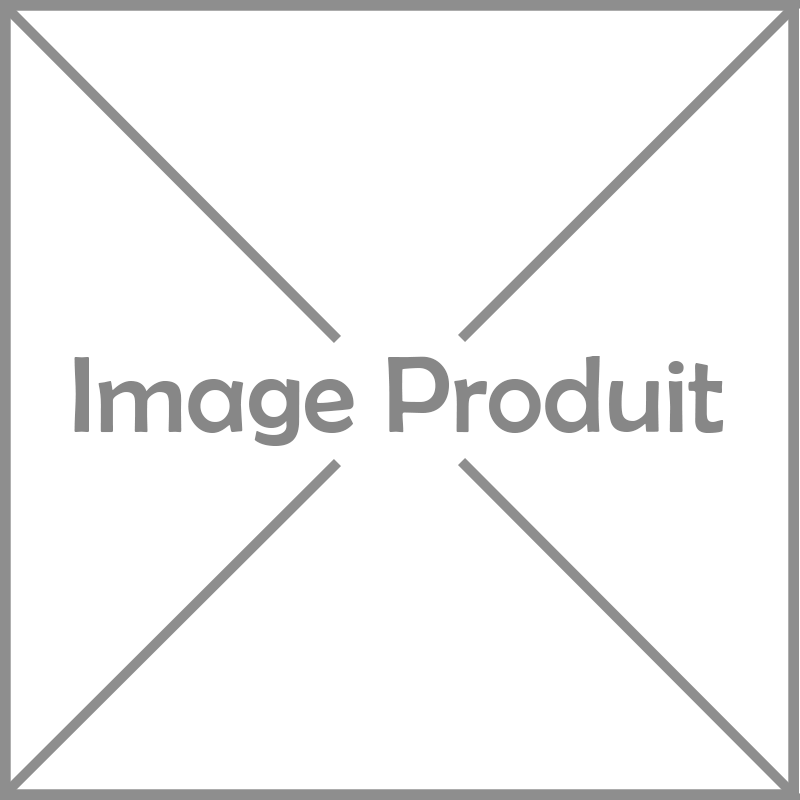
<style>
.page{position:relative;width:800px;height:800px;background:#ffffff}
.page>*{position:absolute;margin:0}
.t1{font:109px "BerlinSansFB-Reg";color:#878787}
</style>
<div class="page">
<p class="t1" style="left:74px;top:356px;width:650px;height:90px">Image Produit</p>
</div>
